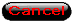
<style>
.page{position:relative;width:74px;height:24px;background:#ffffff}
.page>*{position:absolute;margin:0}
.t1{font:12.3px "ArialMT";color:#ff0000;font-weight:bold;scale:1.4 1}
</style>
<div class="page">
<p class="t1" style="left:9px;top:6px;width:55px;height:9px">Cancel</p>
</div>
